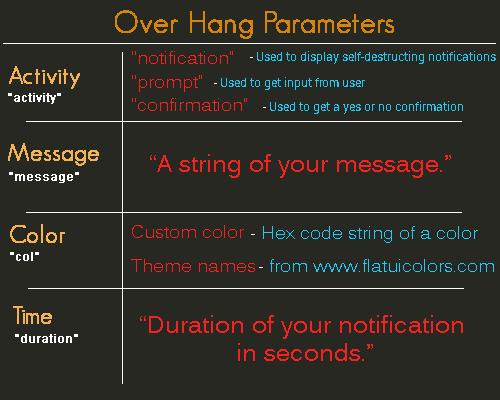
<style>
.page{position:relative;width:500px;height:400px;background:#272822}
.page>*{position:absolute;margin:0}
.t1{font:30px "GeosansLight";color:#d5850d;font-weight:bold}
.t2{font:18px "Kalinga";color:#f52222}
.t3{font:12px "Roboto-Regular";color:#22cbf5}
.t4{font:12px "Roboto-Regular";color:#ffffff}
.t5{font:24px "GeosansLight";color:#f4b350;font-weight:bold}
.t6{font:12px "ArialMT";color:#ffffff;font-weight:bold}
.t7{font:24px "Kalinga";color:#f52222}
.t8{font:18px "Kalinga";color:#22cbf5}
.t9{font:18px "Kalinga";color:#ffffff}
</style>
<div class="page">
<p class="t1" style="left:115px;top:10px;width:279px;height:29px">Over Hang Parameters</p>
<p class="t2" style="left:132px;top:51px;width:101px;height:13px">“notification”</p>
<p class="t3" style="left:250px;top:51px;width:246px;height:13px"><span class="t4">- </span>Used to display self-destructing notifications</p>
<p class="t5" style="left:9px;top:66px;width:71px;height:23px">Activity</p>
<p class="t2" style="left:132px;top:75px;width:70px;height:17px">“prompt”</p>
<p class="t3" style="left:214px;top:77px;width:151px;height:13px"><span class="t4">- </span>Used to get input from user</p>
<p class="t6" style="left:8px;top:93px;width:53px;height:11px">“activity”</p>
<p class="t2" style="left:132px;top:98px;width:115px;height:13px">“confirmation”</p>
<p class="t3" style="left:263px;top:101px;width:200px;height:13px"><span class="t4">- </span>Used to get a yes or no confirmation</p>
<p class="t5" style="left:8px;top:143px;width:91px;height:23px">Message</p>
<p class="t7" style="left:150px;top:154px;width:301px;height:24px">“A string of your message.”</p>
<p class="t6" style="left:9px;top:172px;width:70px;height:11px">“message”</p>
<p class="t5" style="left:10px;top:224px;width:55px;height:19px">Color</p>
<p class="t2" style="left:132px;top:225px;width:112px;height:13px">Custom color</p>
<p class="t8" style="left:251px;top:226px;width:227px;height:17px"><span class="t9">- </span>Hex code string of a color</p>
<p class="t6" style="left:10px;top:252px;width:29px;height:9px">“col”</p>
<p class="t2" style="left:131px;top:259px;width:124px;height:13px">Theme names</p>
<p class="t8" style="left:259px;top:259px;width:235px;height:13px"><span class="t9">- </span>from www.flatuicolors.com</p>
<p class="t5" style="left:13px;top:306px;width:39px;height:18px">Time</p>
<p class="t7" style="left:140px;top:315px;width:323px;height:46px;text-align:center">“Duration of your notification <br>in seconds.”</p>
<p class="t6" style="left:15px;top:334px;width:63px;height:9px">“duration”</p>
</div>
